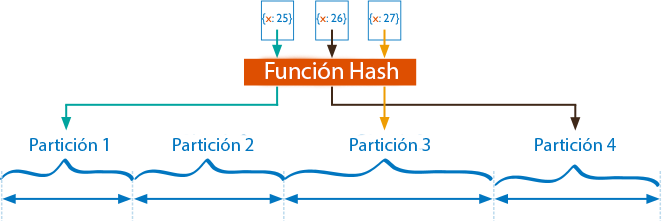
<style>
.page{position:relative;width:662px;height:221px;background:#ffffff}
.page>*{position:absolute;margin:0}
.t1{font:24px "MyriadPro-Regular";color:#ffffff}
.t2{font:18.7px "MyriadPro-Regular";color:#0176c0}
</style>
<div class="page">
<p class="t1" style="left:265px;top:62px;width:133px;height:17px">Función Hash</p>
<p class="t2" style="left:30px;top:138px;width:78px;height:13px">Partición 1</p>
<p class="t2" style="left:173px;top:138px;width:81px;height:13px">Partición 2</p>
<p class="t2" style="left:350px;top:138px;width:80px;height:13px">Partición 3</p>
<p class="t2" style="left:535px;top:138px;width:81px;height:13px">Partición 4</p>
</div>
